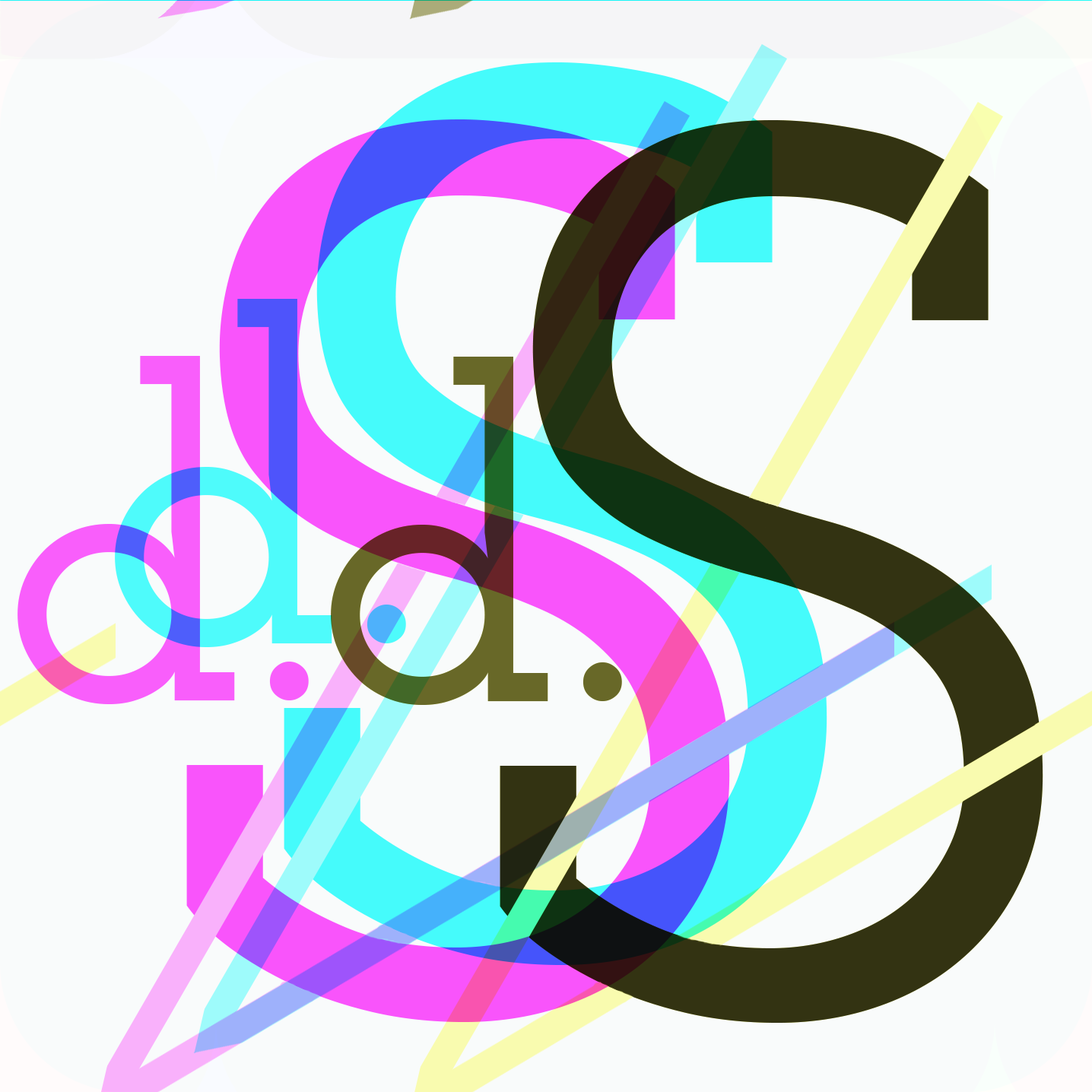
<style>
.page{position:relative;width:1092px;height:1092px;background:#f9fbfb}
.page>*{position:absolute;margin:0}
.t1{font:1267.4px "JosefinSlab-SemiBold"}
.t2{font:459.4px "JosefinSlab-SemiBold"}
</style>
<div class="page">
<p class="t1" style="left:284px;top:62px;width:543px;height:902px">S</p>
<p class="t2" style="left:115px;top:298px;width:291px;height:348px">d.</p>
</div>
